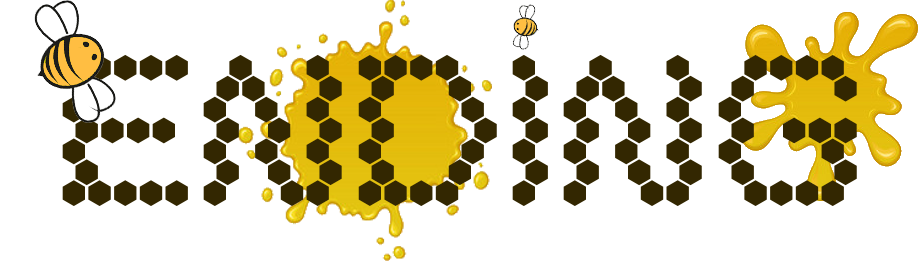
<style>
.page{position:relative;width:918px;height:261px;background:#ffffff}
.page>*{position:absolute;margin:0}
.t1{font:180px "Oh,-Beehive!";color:#332701}
</style>
<div class="page">
<p class="t1" style="left:62px;top:54px;width:795px;height:152px">ENDING</p>
</div>
